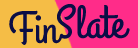
<style>
.page{position:relative;width:138px;height:48px;background:#ff2c89}
.page>*{position:absolute;margin:0}
.t1{font:46.7px "GrandHotel-Regular";color:#0b0e45}
.t2{font:44.4px "GrandHotel-Regular";color:#0b0e45}
</style>
<div class="page">
<p class="t1" style="left:57px;top:4px;width:73px;height:35px">Slate</p>
<p class="t2" style="left:9px;top:10px;width:54px;height:35px">Fin</p>
</div>
